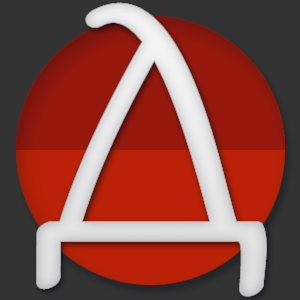
<style>
.page{position:relative;width:300px;height:300px;background:#333333}
.page>*{position:absolute;margin:0}
.t1{font:291.7px "Kotyhoroshko-Regular";color:#dfdfdf}
</style>
<div class="page">
<p class="t1" style="left:37px;top:3px;width:229px;height:293px">Д</p>
</div>
